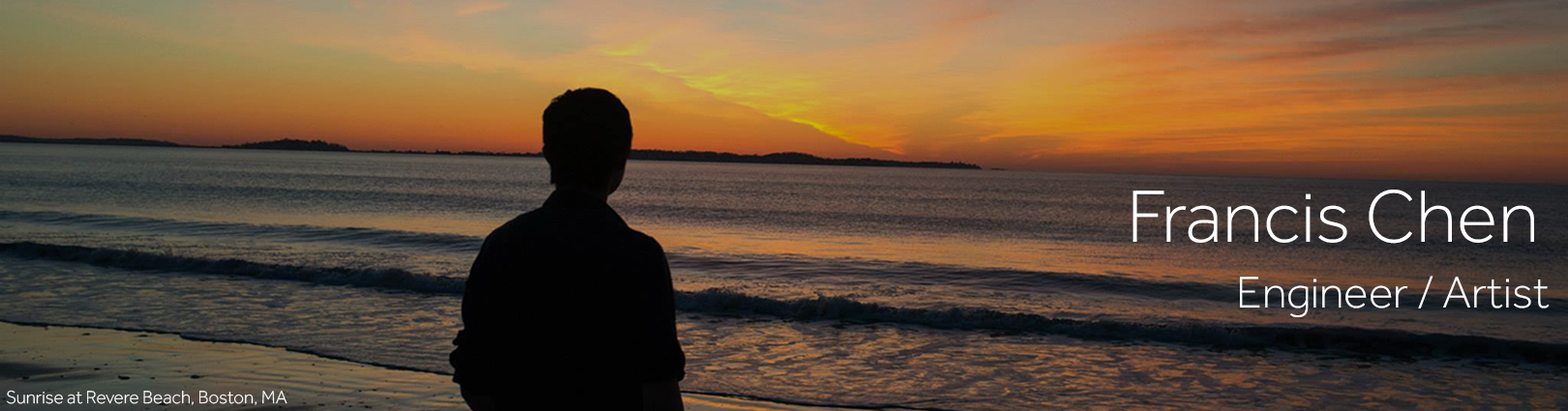
<style>
.page{position:relative;width:1568px;height:411px}
.page>*{position:absolute;margin:0}
.t1{font:76.5px "Effra-Light";color:#ffffff}
.t2{font:45.9px "Effra-Light";color:#ffffff}
.t3{font:18.4px "Effra-Light";color:#ffffff}
</style>
<div class="page">
<p class="t1" style="left:1132px;top:190px;width:402px;height:54px">Francis Chen</p>
<p class="t2" style="left:1240px;top:276px;width:310px;height:41px">Engineer / Artist</p>
<p class="t3" style="left:7px;top:390px;width:280px;height:16px">Sunrise at Revere Beach, Boston, MA</p>
</div>
